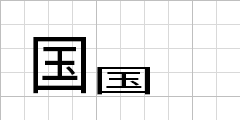
<style>
.page{position:relative;width:240px;height:120px;background:#ffffff}
.page>*{position:absolute;margin:0}
.t1{font:64px "NotoSansCJKjp-Regular";color:#000000}
.t2{font:32px "NotoSansCJKjp-Regular";color:#000000;scale:2 1}
</style>
<div class="page">
<p class="t1" style="left:33px;top:37px;width:117px;height:58px">国<span class="t2">国</span></p>
</div>
